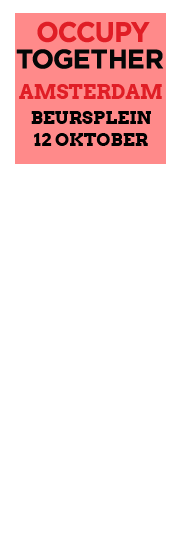
<style>
.page{position:relative;width:180px;height:540px;background:#ffffff}
.page>*{position:absolute;margin:0}
.t1{font:18px/25px "Arvo-Bold";color:#000000;text-transform:uppercase}
.t2{font:20px "Arvo-Bold";color:#e01e26;text-transform:uppercase}
.t3{font:18px/22px "Arvo-Bold";color:#000000;text-transform:uppercase}
</style>
<div class="page">
<p class="t1" style="left:19px;top:84px;width:143px;height:62px;text-align:center"><span class="t2">amsterdam<br></span>beursplein<br><span class="t3">12 oktober</span></p>
</div>
